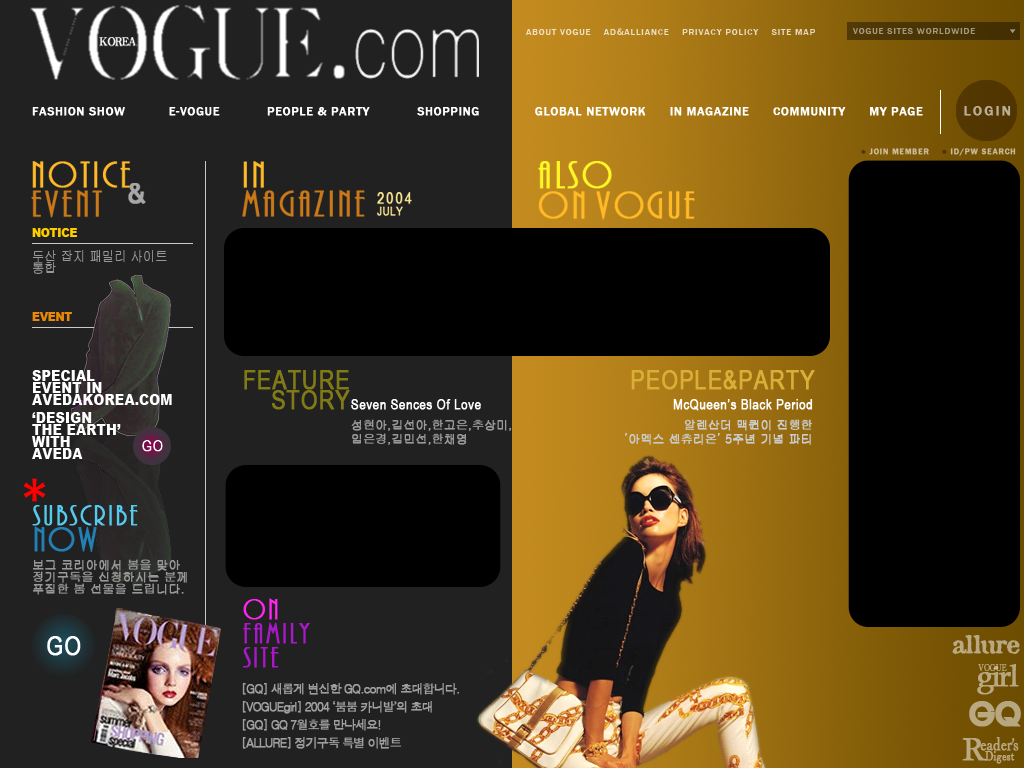
<style>
.page{position:relative;width:1024px;height:768px;background:#212121}
.page>*{position:absolute;margin:0}
.t1{font:9px "FranklinGothic-Medium";letter-spacing:0.1em;color:#ebdec5}
.t2{font:9px "FranklinGothic-Medium";letter-spacing:0.1em;color:#a49a81}
.t3{font:5px "FranklinGothic-Medium";letter-spacing:0.1em;color:#a19780;scale:1.5 1}
.t4{font:12px "FranklinGothic-Medium";letter-spacing:0.05em;color:#ffffff;font-weight:bold}
.t5{font:14px "FranklinGothic-Medium";letter-spacing:0.14em;color:#baaf99;font-weight:bold}
.t6{font:8px "FranklinGothic-Medium";letter-spacing:0.1em;color:#c7ba9a;font-weight:bold}
.t7{font:15px/12px "Arial-Black";color:#ffffff;scale:0.88 1}
.t8{font:12px/12px "Arial-Black";color:#ffcc00;scale:0.88 1}
.t9{font:14px/12px "Gulim";color:#989898;scale:0.88 1}
.t10{font:12px/12px "Arial-Black";color:#ea8809;scale:0.88 1}
.t11{font:15px/18px "Arial-Black";color:#ffffff;scale:0.88 1}
.t12{font:26px/20px "ArialNarrow";letter-spacing:0.02em;color:#827b15;font-weight:bold}
.t13{font:26px "ArialNarrow";letter-spacing:0.02em;color:#d8b037;font-weight:bold}
.t14{font:14px/20px "ArialNarrow";letter-spacing:0.02em;color:#ffffff;font-weight:bold}
.t15{font:12px/20px "Gulim";letter-spacing:-0.02em;color:#999999;font-weight:bold}
.t16{font:12px/14px "Gulim";letter-spacing:-0.02em;color:#999999;font-weight:bold}
.t17{font:12px/20px "Gulim";letter-spacing:-0.02em;color:#cccccc;font-weight:bold}
.t18{font:12px/14px "Gulim";letter-spacing:-0.02em;color:#cccccc;font-weight:bold}
.t19{font:30px/6px "PlazaD-Regu";letter-spacing:-0.1em;color:#54cbed;font-weight:bold}
.t20{font:57.6px/6px "Bauhaus";letter-spacing:0.02em;color:#ff0000}
.t21{font:36px/26px "PlazaD-Regu";letter-spacing:-0.1em;color:#2380b5;font-weight:bold}
.t22{font:12px/12px "Gulim";color:#989898;font-weight:bold}
.t23{font:30px/24px "PlazaD-Regu";letter-spacing:-0.1em;color:#ab18cb;font-weight:bold}
.t24{font:30px/24px "PlazaD-Regu";letter-spacing:-0.1em;color:#ff26f2;font-weight:bold}
.t25{font:26px "ArialNarrow";letter-spacing:0.02em;color:#ffffff;font-weight:bold}
.t26{font:24px "Attic";letter-spacing:-0.04em;color:#b9a881;font-weight:bold}
.t27{font:30px "BookAntiqua";letter-spacing:-0.1em;color:#b8a780;font-weight:bold;scale:1.08 1}
.t28{font:10px "Albatross";letter-spacing:0.02em;color:#b8a881}
.t29{font:12px/18px "Dotum";letter-spacing:-0.1em;color:#9f9f9f;font-weight:bold}
.t30{font:48px "Gordon";color:#b8a780;font-weight:bold}
.t31{font:18px "Albatross";color:#b8a780;font-weight:bold}
.t32{font:18px "Albatross";letter-spacing:-0.04em;color:#b8a780;font-weight:bold}
.t33{font:36px "Garamond";letter-spacing:0.02em;color:#b9a881;font-weight:bold}
.t34{font:13px "Albatross";letter-spacing:0.02em;color:#b7a780;font-weight:bold}
</style>
<div class="page">
<p class="t1" style="left:526px;top:28px;width:289px;height:7px">ABOUT VOGUE    AD&amp;ALLIANCE    PRIVACY POLICY    SITE MAP</p>
<p class="t2" style="left:853px;top:28px;width:122px;height:6px">VOGUE SITES WORLDWIDE</p>
<p class="t3" style="left:1010px;top:29px;width:6px;height:4px">▼</p>
<p class="t4" style="left:32px;top:107px;width:891px;height:9px">FASHION SHOW           E-VOGUE            PEOPLE &amp; PARTY            SHOPPING              GLOBAL NETWORK      IN MAGAZINE      COMMUNITY      MY PAGE</p>
<p class="t5" style="left:964px;top:106px;width:47px;height:10px">LOGIN</p>
<p class="t6" style="left:861px;top:148px;width:155px;height:8px">● JOIN MEMBER    ● ID/PW SEARCH</p>
<p class="t7" style="left:32px;top:228px;width:140px;height:231px"><span class="t8">NOTICE<br><br></span><span class="t9">두산 잡지 패밀리 사이트<br>통합<br><br><br></span><span class="t10"><br>EVENT<br><br><br><br><br></span>SPECIAL<br>EVENT IN<br>AVEDAKOREA.COM<br><span class="t11">‘DESIGN<br></span>THE EARTH’<br>WITH<br>AVEDA</p>
<p class="t12" style="left:244px;top:370px;width:106px;height:40px;text-align:right">FEATURE<br>STORY</p>
<p class="t13" style="left:631px;top:370px;width:184px;height:20px">PEOPLE&amp;PARTY</p>
<p class="t14" style="left:351px;top:399px;width:161px;height:46px">Seven Sences Of Love<br><span class="t15">성현아,김선아,한고은,추상미,<br></span><span class="t16">임은경,김민선,한채영</span></p>
<p class="t14" style="left:625px;top:399px;width:188px;height:46px;text-align:right">McQueen’s Black Period<br><span class="t17">알렌산더 맥퀸이 진행한<br></span><span class="t18">’아멕스 센츄리온’ 5주년 기념 파티</span></p>
<p class="t19" style="left:23px;top:478px;width:115px;height:74px"><span class="t20">*<br>  </span>S U B S C R I B E<br><span class="t21">  n o w</span></p>
<p class="t22" style="left:33px;top:559px;width:154px;height:36px">보그 코리아에서 봄을 맞아<br>정기구독을 신청하시는 분께<br>푸짐한 봄 선물을 드립니다.</p>
<p class="t23" style="left:243px;top:598px;width:67px;height:70px"><span class="t24">o N<br></span>F A M I L Y<br>S I T E</p>
<p class="t25" style="left:47px;top:636px;width:34px;height:20px">GO</p>
<p class="t26" style="left:952px;top:635px;width:68px;height:19px">allure</p>
<p class="t27" style="left:977px;top:664px;width:42px;height:31px">girl</p>
<p class="t28" style="left:978px;top:664px;width:29px;height:7px">VOGUE</p>
<p class="t29" style="left:242px;top:683px;width:217px;height:66px">[GQ] 새롭게 변신한 GQ.com에 초대합니다.<br>[VOGUEgirl] 2004 ‘붐붐 카니발’의 초대<br>[GQ] GQ 7월호를 만나세요!<br>[ALLURE] 정기구독 특별 이벤트</p>
<p class="t30" style="left:969px;top:701px;width:52px;height:26px">GQ</p>
<p class="t31" style="left:980px;top:737px;width:39px;height:14px">eade<span class="t32">r’s</span></p>
<p class="t33" style="left:962px;top:738px;width:25px;height:23px">R</p>
<p class="t34" style="left:985px;top:751px;width:30px;height:13px">Digest</p>
</div>
